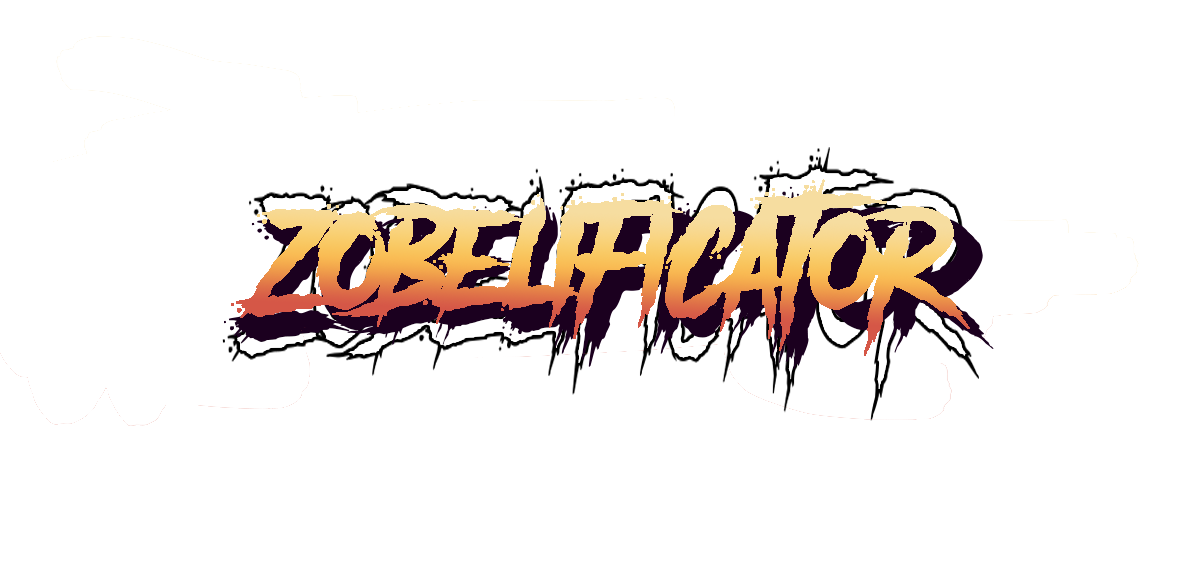
<style>
.page{position:relative;width:1200px;height:565px;background:#ffffff}
.page>*{position:absolute;margin:0}
.t1{font:125px "AnotherDangerDemo"}
</style>
<div class="page">
<p class="t1" style="left:224px;top:186px;width:763px;height:176px">ZOBELIFICATOR</p>
<p class="t1" style="left:231px;top:193px;width:763px;height:176px">ZOBELIFICATOR</p>
</div>
